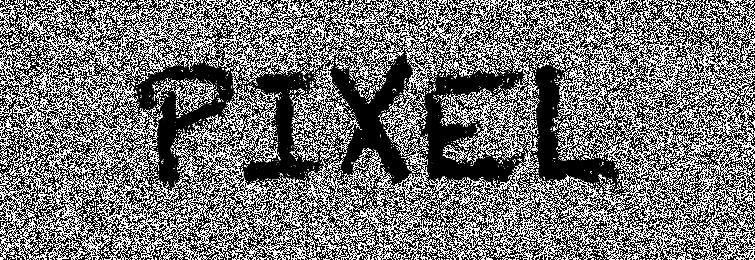
<style>
.page{position:relative;width:755px;height:260px;background:#000000}
.page>*{position:absolute;margin:0}
.t1{font:150px "Chalkduster";color:#000000}
</style>
<div class="page">
<p class="t1" style="left:136px;top:54px;width:483px;height:134px">PIXEL</p>
</div>
